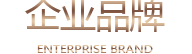
<style>
.page{position:relative;width:192px;height:54px;background:#ffffff}
.page>*{position:absolute;margin:0}
.t1{font:34.2px "MicrosoftYaHei";scale:1.05 1}
.t2{font:11.4px "MicrosoftYaHei";scale:1.05 1}
</style>
<div class="page">
<p class="t1" style="left:25px;top:0px;width:140px;height:32px">企业品牌</p>
<p class="t2" style="left:37px;top:45px;width:116px;height:8px">ENTERPRISE BRAND</p>
</div>
